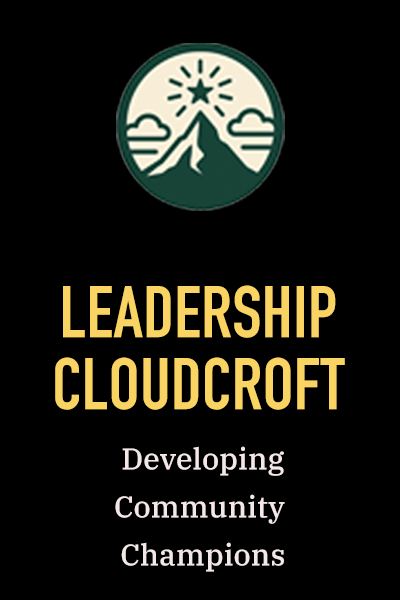
<style>
.page{position:relative;width:400px;height:600px;background:#000000}
.page>*{position:absolute;margin:0}
.t1{font:72px/72px "DINCondensed-Bold";letter-spacing:0.005em;color:#f9d463}
.t2{font:30px/48px "IBMPlexSerif-Medium";letter-spacing:0.005em;color:#f3e7e7}
</style>
<div class="page">
<p class="t1" style="left:55px;top:285px;width:290px;height:125px;text-align:center">LEADERSHIP<br>CLOUDCROFT</p>
<p class="t2" style="left:115px;top:446px;width:170px;height:126px;text-align:center">Developing<br>Community <br>Champions</p>
</div>
